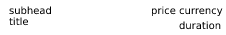
<style>
.page{position:relative;width:226px;height:35px;background:#ffffff}
.page>*{position:absolute;margin:0}
.t1{font:10px "DejaVuSans";color:#000000}
</style>
<div class="page">
<p class="t1" style="left:9px;top:6px;width:42px;height:9px">subhead</p>
<p class="t1" style="left:151px;top:6px;width:72px;height:11px">price currency</p>
<p class="t1" style="left:9px;top:17px;width:20px;height:9px">title</p>
<p class="t1" style="left:179px;top:21px;width:42px;height:9px">duration</p>
</div>
